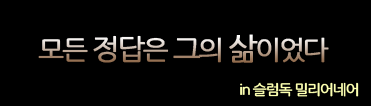
<style>
.page{position:relative;width:371px;height:106px;background:#000000}
.page>*{position:absolute;margin:0}
.t1{font:26px "NanumGothic";letter-spacing:-0.095em;font-weight:bold;scale:1.05 1}
.t2{font:28px "NanumGothic";letter-spacing:-0.095em;font-weight:bold;scale:1.05 1}
.t3{font:30px "NanumGothic";letter-spacing:-0.095em;font-weight:bold;scale:1.05 1}
.t4{font:14px "NanumGothic";letter-spacing:-0.095em;color:#fcffb0;font-weight:bold;scale:1.05 1}
</style>
<div class="page">
<p class="t1" style="left:38px;top:34px;width:291px;height:29px">모든 <span class="t2">정답</span>은 <span class="t2">그</span>의 <span class="t3">삶</span>이었다</p>
<p class="t4" style="left:240px;top:82px;width:119px;height:15px">in 슬럼독 밀리어네어</p>
</div>
